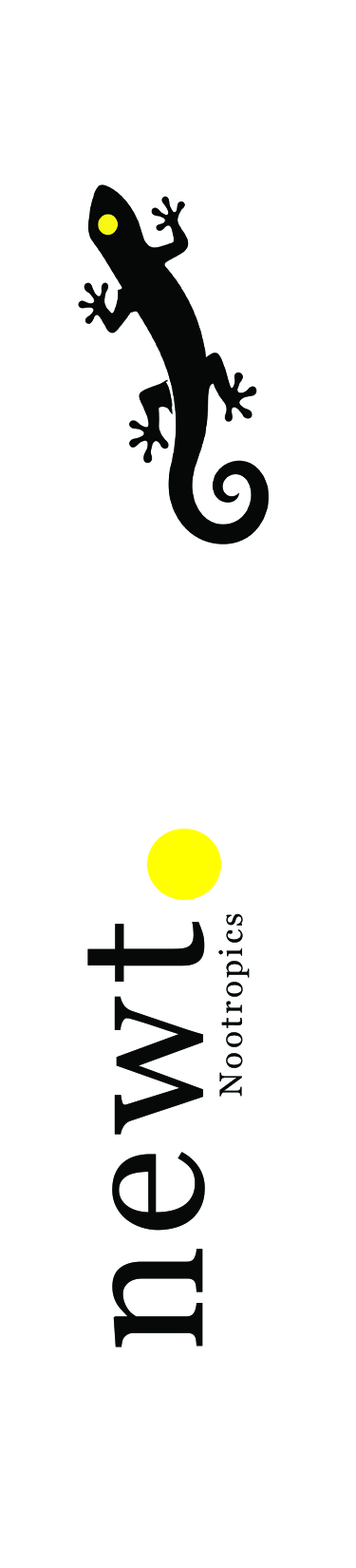
<style>
.page{position:relative;width:356px;height:1568px;background:#ffffff}
.page>*{position:absolute;margin:0}
.t1{font:31.7px "Georgia";letter-spacing:0.1em;color:#070909}
.t2{font:182.1px "Georgia";letter-spacing:0.1em;color:#070909}
</style>
<div class="page">
<p class="t1" style="left:219px;top:913px;width:31px;height:184px;rotate:-90deg">Nootropics</p>
<p class="t2" style="left:87px;top:922px;width:118px;height:426px;rotate:-90deg">newt</p>
</div>
